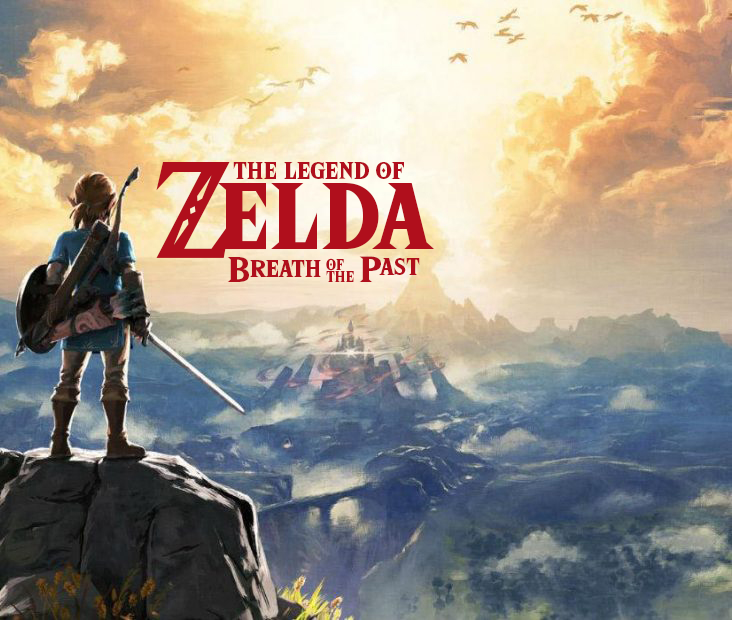
<style>
.page{position:relative;width:732px;height:620px}
.page>*{position:absolute;margin:0}
.t1{font:120px "HyliaSerifBeta-Regular";color:#b00f1c}
.t2{font:28px "HyliaSerifBeta-Regular";color:#b00f1c}
.t3{font:110px "HyliaSerifBeta-Regular";color:#b00f1c}
.t4{font:42px "HyliaSerifBeta-Regular";color:#b00f1c}
.t5{font:18px "HyliaSerifBeta-Regular";color:#b00f1c}
</style>
<div class="page">
<p class="t1" style="left:156px;top:162px;width:74px;height:96px">Z</p>
<p class="t2" style="left:233px;top:162px;width:171px;height:18px">the legend of</p>
<p class="t3" style="left:218px;top:183px;width:216px;height:67px">elda</p>
<p class="t4" style="left:227px;top:257px;width:22px;height:25px">b</p>
<p class="t4" style="left:359px;top:256px;width:22px;height:26px">p</p>
<p class="t2" style="left:250px;top:260px;width:71px;height:17px">reath</p>
<p class="t5" style="left:326px;top:258px;width:18px;height:13px">of</p>
<p class="t2" style="left:379px;top:258px;width:41px;height:17px">ast</p>
<p class="t5" style="left:326px;top:271px;width:28px;height:11px">the</p>
</div>
